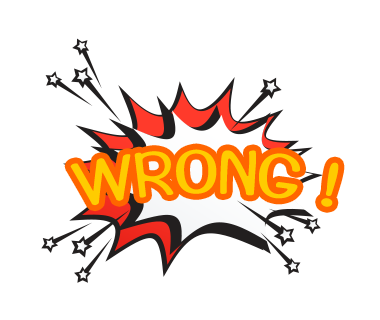
<style>
.page{position:relative;width:380px;height:320px;background:#ffffff}
.page>*{position:absolute;margin:0}
.t1{font:62.5px "JuanMikes-Regular";color:#ffcc00}
</style>
<div class="page">
<p class="t1" style="left:70px;top:149px;width:269px;height:58px">WRONG !</p>
</div>
